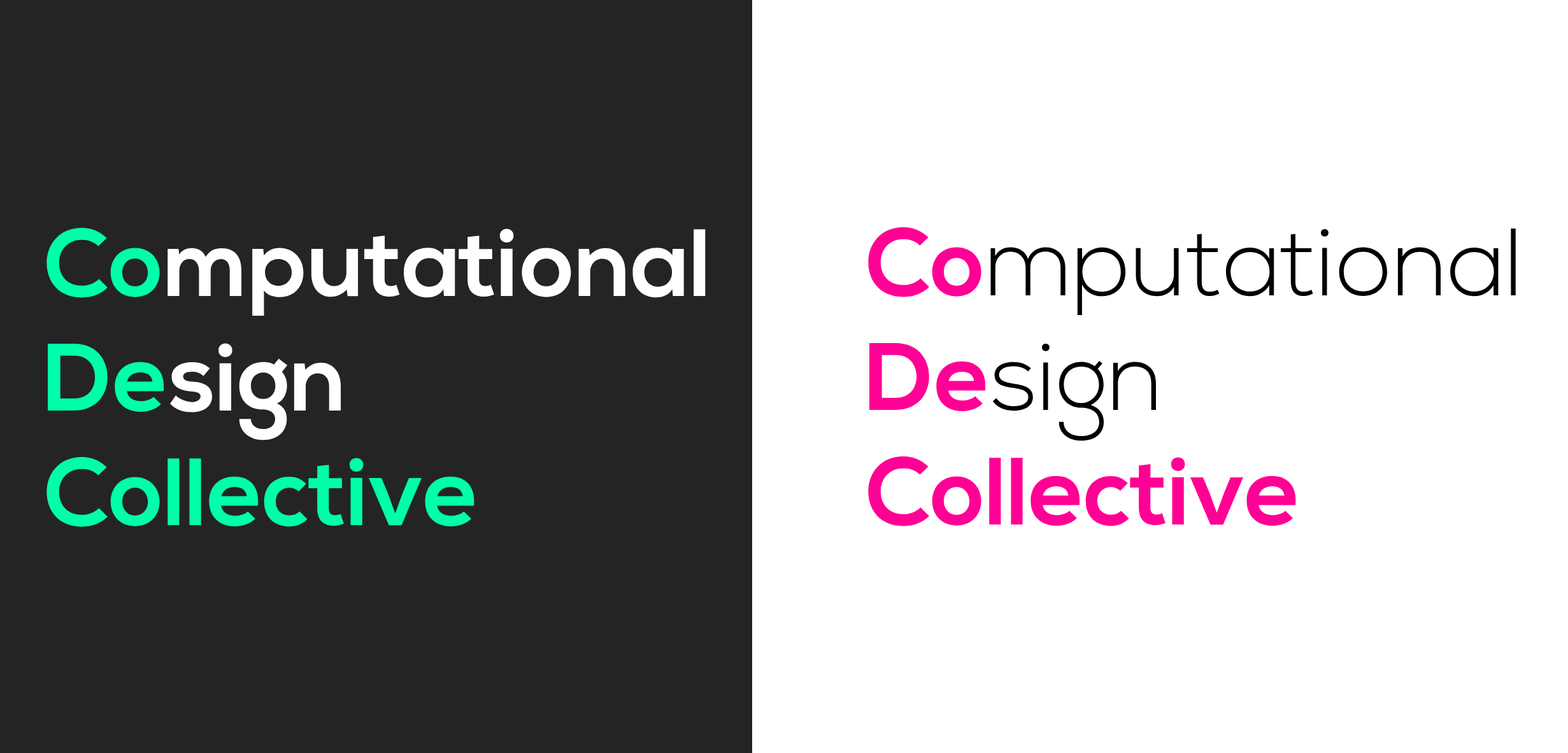
<style>
.page{position:relative;width:1568px;height:753px;background:#ffffff}
.page>*{position:absolute;margin:0}
.t1{font:95.5px "NexaBold"}
.t2{font:95.5px "NexaLight"}
</style>
<div class="page">
<p class="t1" style="left:46px;top:226px;width:660px;height:301px;text-align:justify">Computational<br>Design<br>Collective</p>
<p class="t2" style="left:868px;top:227px;width:648px;height:300px;text-align:justify"><span class="t1">Co</span>mputational<br><span class="t1">De</span>sign<br><span class="t1">Collective</span></p>
</div>
